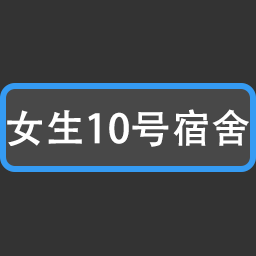
<style>
.page{position:relative;width:256px;height:256px;background:#333333}
.page>*{position:absolute;margin:0}
.t1{font:39px "AdobeHeitiStd-Regular";color:#ffffff;font-weight:bold}
</style>
<div class="page">
<p class="t1" style="left:7px;top:109px;width:242px;height:38px">女生10号宿舍</p>
</div>
